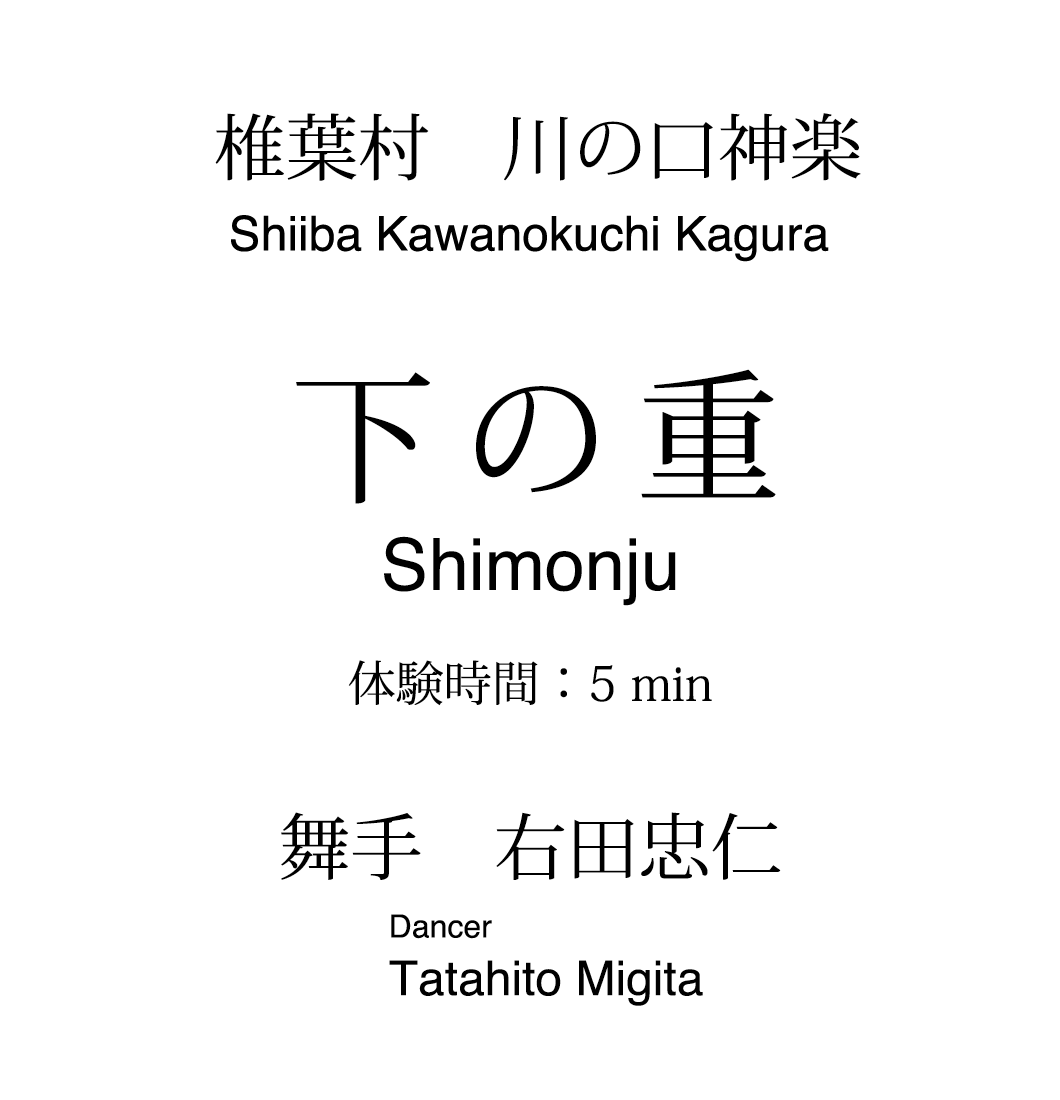
<style>
.page{position:relative;width:1060px;height:1100px;background:#ffffff}
.page>*{position:absolute;margin:0}
.t1{font:72px "KozMinPro-Regular";color:#000000}
.t2{font:144px "KozMinPro-Regular";letter-spacing:0.2em;color:#000000}
.t3{font:72px "Helvetica";color:#000000}
.t4{font:48px "KozMinPro-Regular";color:#000000}
.t5{font:48px "Helvetica";color:#000000}
.t6{font:32px "Helvetica";color:#000000}
</style>
<div class="page">
<p class="t1" style="left:215px;top:113px;width:646px;height:68px">椎葉村　川の口神楽</p>
<p class="t2" style="left:296px;top:369px;width:480px;height:135px">下の重</p>
<p class="t3" style="left:384px;top:536px;width:292px;height:70px">Shimonju</p>
<p class="t4" style="left:348px;top:660px;width:364px;height:46px">体験時間：5 min</p>
<p class="t1" style="left:281px;top:812px;width:500px;height:68px">舞手　右田忠仁</p>
<p class="t5" style="left:389px;top:914px;width:314px;height:92px"><span class="t6">Dancer<br></span>Tatahito Migita</p>
</div>
